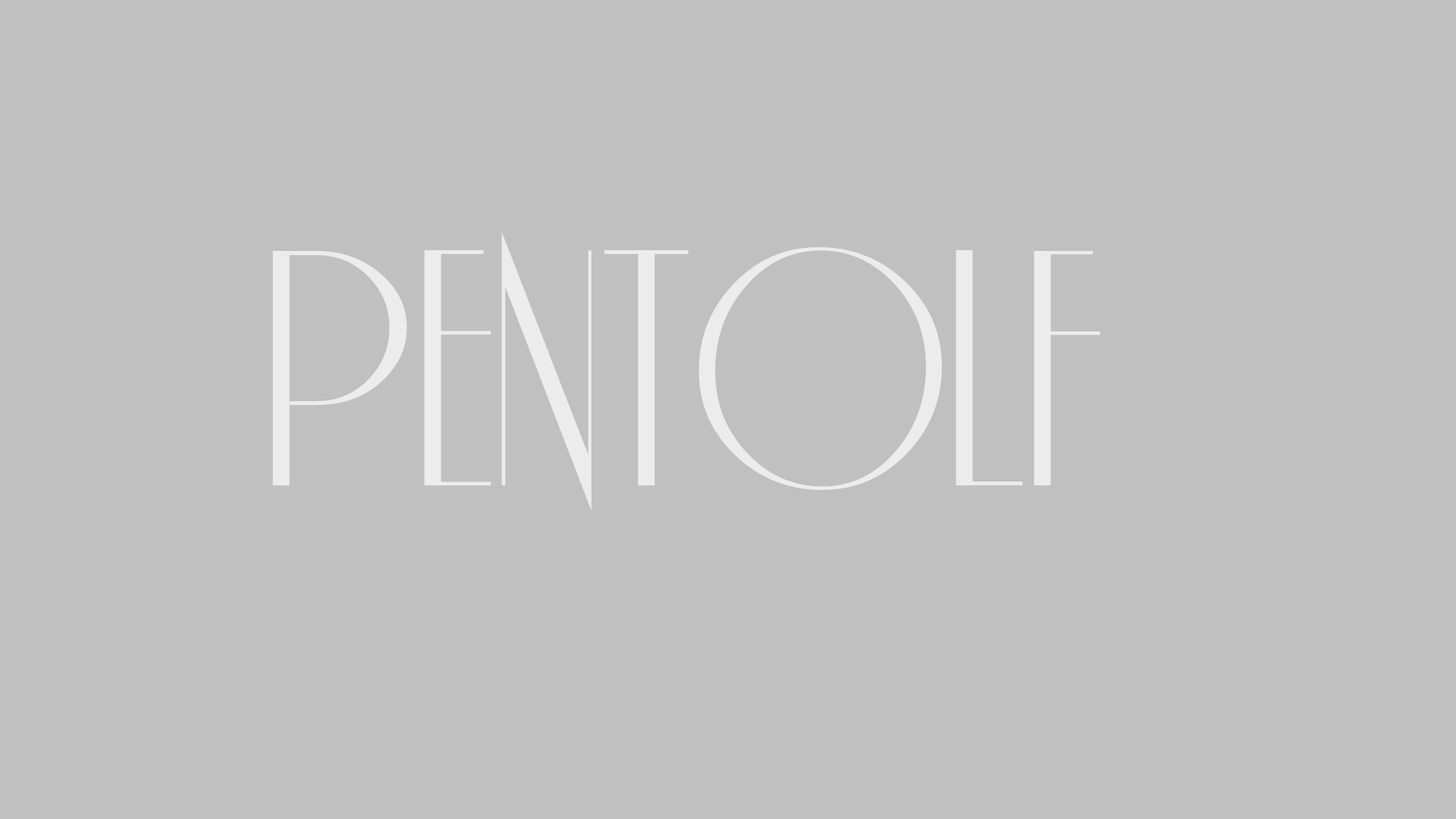
<style>
.page{position:relative;width:1456px;height:819px;background:#c0c0c0}
.page>*{position:absolute;margin:0}
.t1{font:385.7px "Riesling";color:#ececec}
</style>
<div class="page">
<p class="t1" style="left:272px;top:231px;width:828px;height:279px">PENTOLF</p>
</div>
